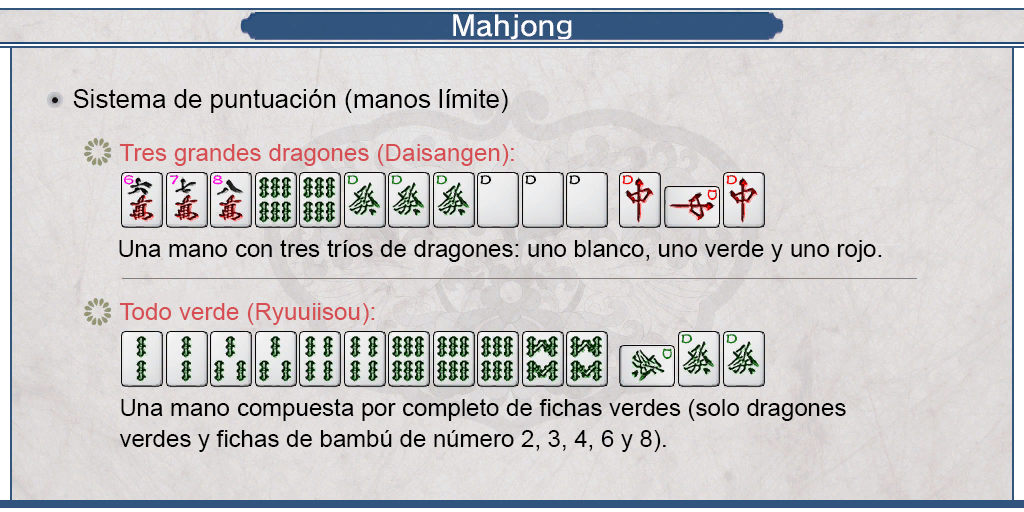
<style>
.page{position:relative;width:1024px;height:512px}
.page>*{position:absolute;margin:0}
.t1{font:26px "ArialMT";color:#000000}
.t2{font:24px "ArialMT";color:#d64d52}
.t3{font:24px "ArialMT";color:#000000}
.t4{font:24px/31px "ArialMT";color:#000000}
</style>
<div class="page">
<p class="t1" style="left:73px;top:89px;width:435px;height:24px">Sistema de puntuación (manos límite)</p>
<p class="t2" style="left:119px;top:144px;width:395px;height:22px">Tres grandes dragones (Daisangen):</p>
<p class="t3" style="left:119px;top:239px;width:763px;height:23px">Una mano con tres tríos de dragones: uno blanco, uno verde y uno rojo.</p>
<p class="t2" style="left:119px;top:303px;width:256px;height:22px">Todo verde (Ryuuiisou):</p>
<p class="t4" style="left:119px;top:398px;width:727px;height:54px;text-align:justify">Una mano compuesta por completo de fichas verdes (solo dragones<br>verdes y fichas de bambú de número 2, 3, 4, 6 y 8).</p>
</div>
